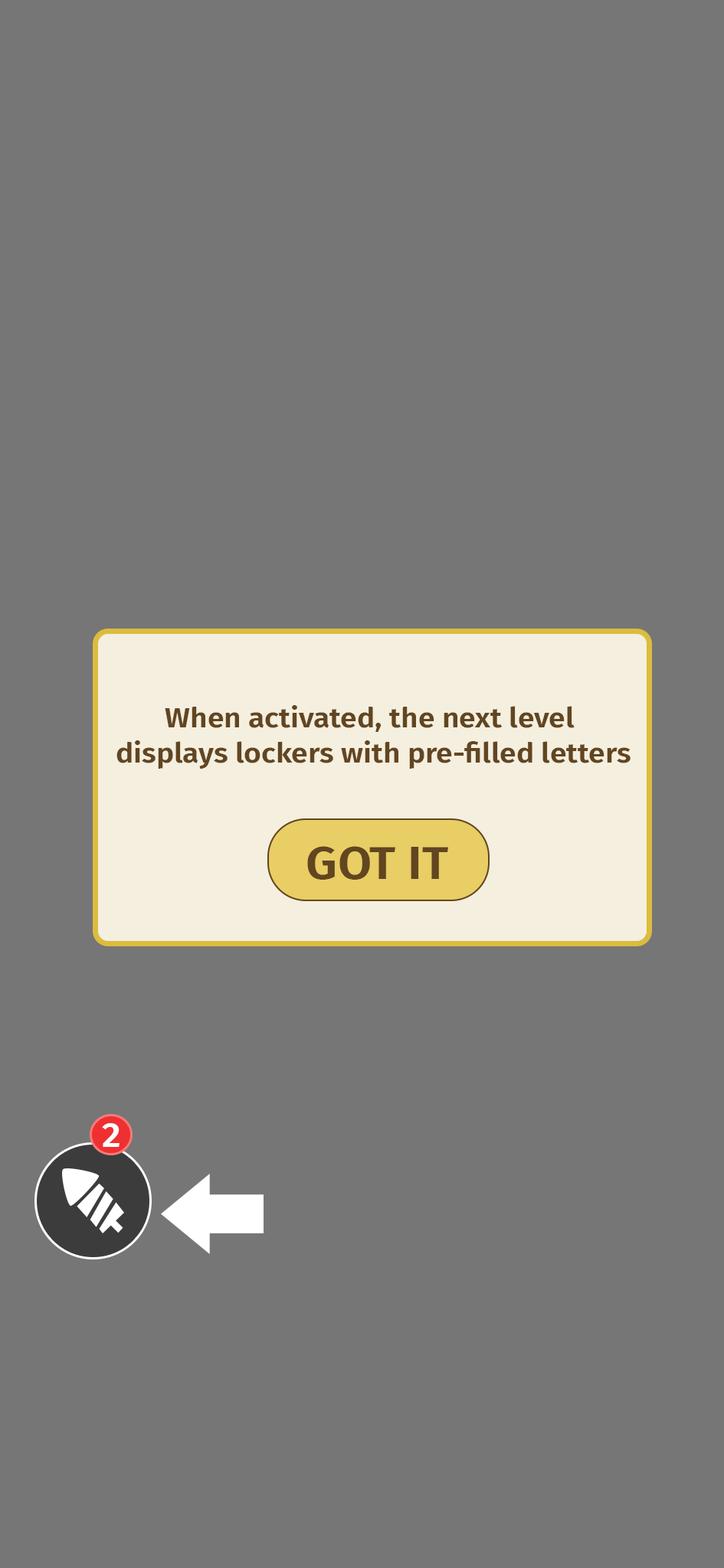
<style>
.page{position:relative;width:724px;height:1568px;background:#767676}
.page>*{position:absolute;margin:0}
.t1{font:28.4px "FiraSans-SemiBold";color:#624521;scale:1.05 1}
.t2{font:46.5px "FiraSans-SemiBold";color:#624521;scale:1.05 1}
.t3{font:35.1px "FiraSans-SemiBold";color:#ffffff;scale:1.05 1}
</style>
<div class="page">
<p class="t1" style="left:116px;top:705px;width:514px;height:64px;text-align:center">When activated, the next level <br>displays lockers with pre-filled letters</p>
<p class="t2" style="left:307px;top:846px;width:141px;height:34px">GOT IT</p>
<p class="t3" style="left:102px;top:1123px;width:17px;height:24px">2</p>
</div>
